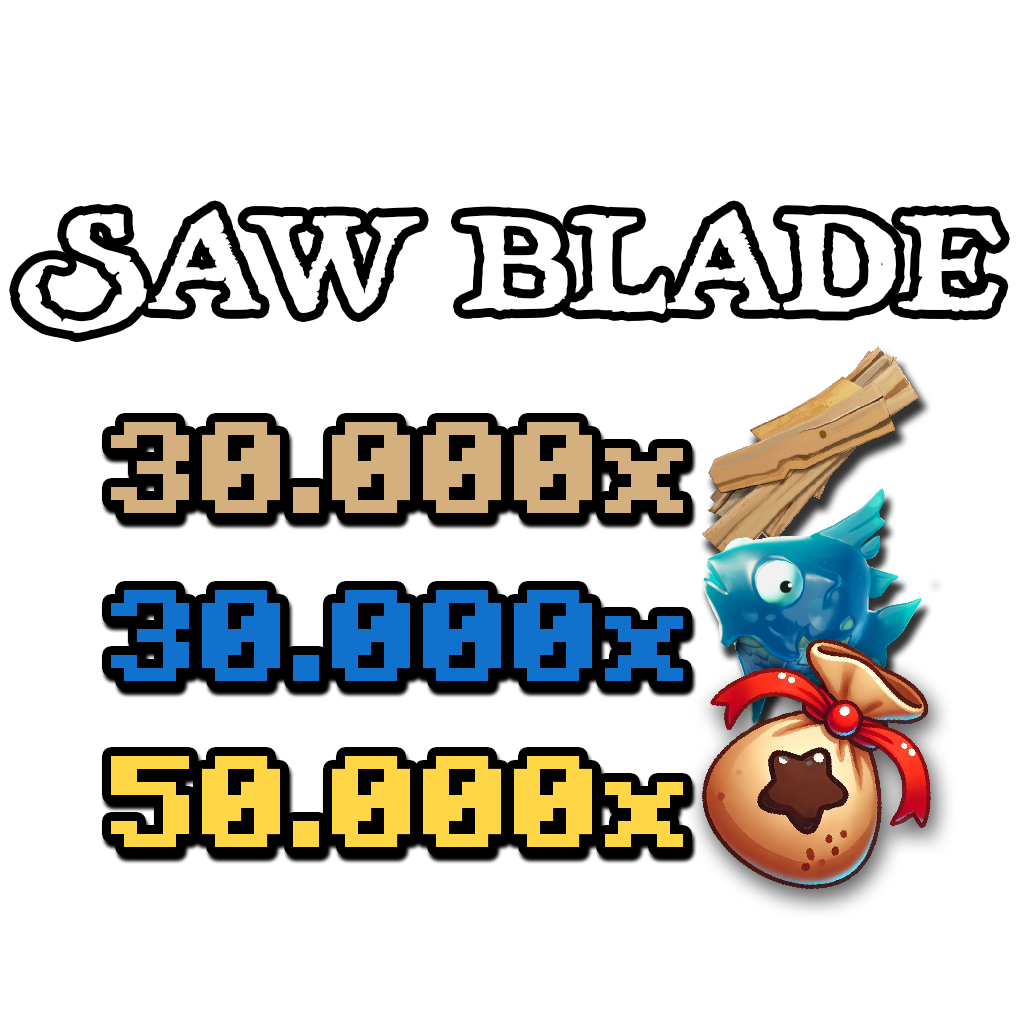
<style>
.page{position:relative;width:1024px;height:1024px;background:#ffffff}
.page>*{position:absolute;margin:0}
.t1{font:135px "treasuremap";color:#ffffff}
.t2{font:130px "Minecraft-Bold";color:#d4b07f}
.t3{font:130px "Minecraft-Bold";color:#1172cd}
.t4{font:130px "Minecraft-Bold";color:#ffd646}
</style>
<div class="page">
<p class="t1" style="left:18px;top:209px;width:983px;height:124px">SAW BLADE</p>
<p class="t2" style="left:111px;top:422px;width:572px;height:91px">30.000x</p>
<p class="t3" style="left:111px;top:590px;width:572px;height:91px">30.000x</p>
<p class="t4" style="left:111px;top:756px;width:572px;height:91px">50.000x</p>
</div>
